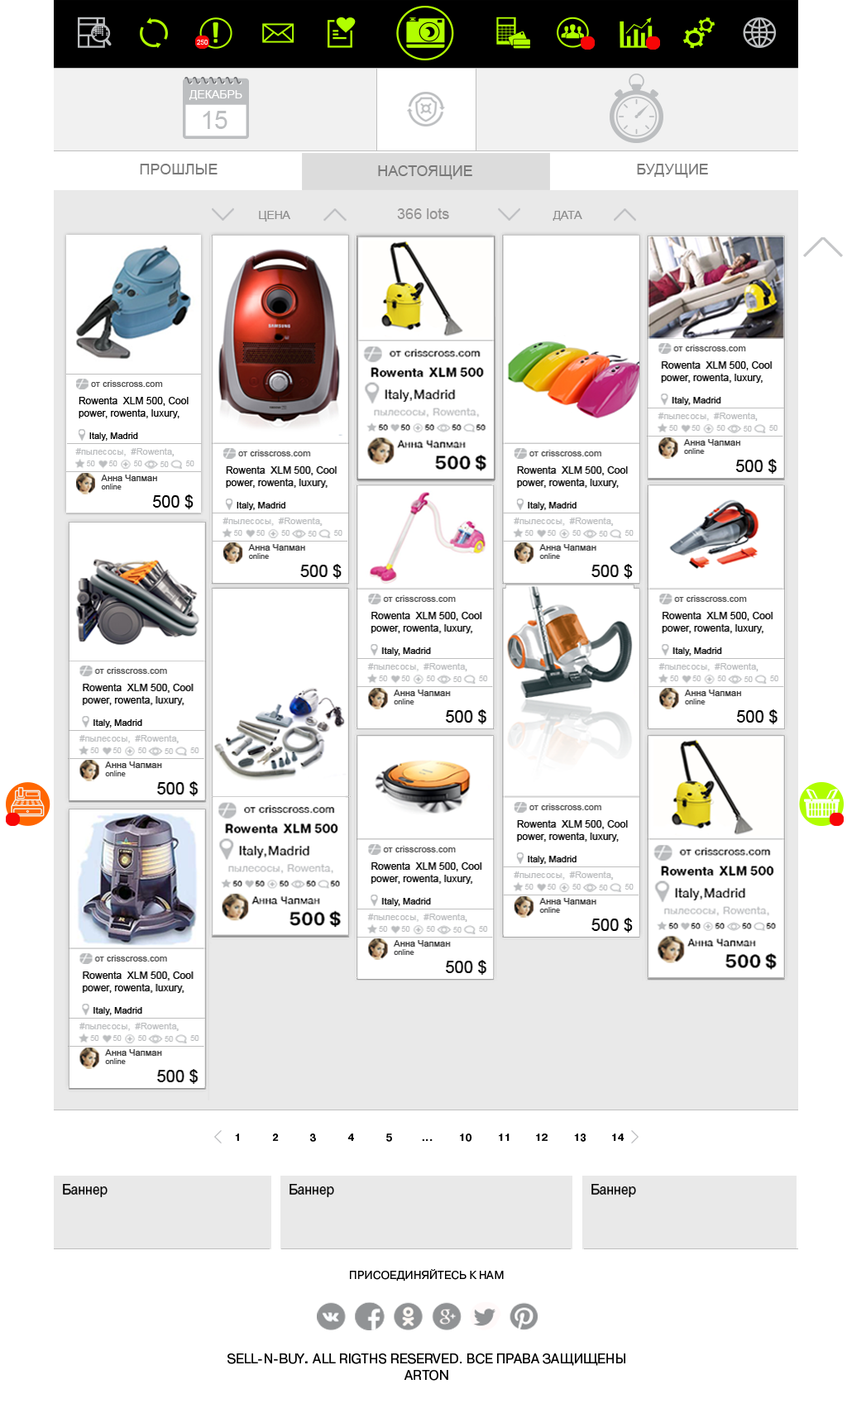
<style>
.page{position:relative;width:847px;height:1408px;background:#ffffff}
.page>*{position:absolute;margin:0}
.t1{font:6.6px "ArialMT";color:#ffffff;text-transform:uppercase}
.t2{font:11.6px "ArialMT";color:#ffffff;text-transform:uppercase}
.t3{font:24.8px "ArialMT";color:#bcbec0;text-transform:uppercase}
.t4{font:14.9px "ArialMT";color:#7a7a7a;text-transform:uppercase}
.t5{font:14.9px "ArialMT";color:#959494}
.t6{font:11.4px "ArialMT";color:#8d8d8d}
.t7{font:9.1px "ArialMT";color:#505050}
.t8{font:9.9px "ArialMT";color:#000000}
.t9{font:9.1px "ArialMT";color:#000000}
.t10{font:9.1px "ArialMT";color:#bbbdbf}
.t11{font:10.1px "Micra";color:#bbbdbf}
.t12{font:7.4px "ArialMT";color:#bbbdbf}
.t13{font:9.1px "ArialMT";color:#313131}
.t14{font:7.4px "ArialMT";color:#48494a}
.t15{font:7.4px "ArialMT";color:#313131}
.t16{font:16.5px "ArialMT";color:#000000}
.t17{font:10px "PragmaticaC-Bold";color:#000000}
.t18{font:11.4px "PragmaticaC";color:#000000;text-transform:uppercase}
.t19{font:13.3px "PragmaticaC";color:#000000;text-transform:uppercase}
.t20{font:13.3px "PragmaticaC-Bold";color:#000000;text-transform:uppercase}
</style>
<div class="page">
<p class="t1" style="left:197px;top:40px;width:11px;height:5px">250</p>
<p class="t2" style="left:189px;top:90px;width:53px;height:10px">декабрь</p>
<p class="t3" style="left:203px;top:111px;width:24px;height:18px">15</p>
<p class="t4" style="left:140px;top:164px;width:77px;height:10px">прошлые</p>
<p class="t4" style="left:378px;top:165px;width:94px;height:14px">настоящие</p>
<p class="t4" style="left:637px;top:164px;width:71px;height:14px">будущие</p>
<p class="t5" style="left:397px;top:208px;width:52px;height:11px">366 lots</p>
<p class="t6" style="left:259px;top:211px;width:31px;height:11px">ЦЕНА</p>
<p class="t6" style="left:552px;top:211px;width:30px;height:10px">ДАТА</p>
<p class="t7" style="left:91px;top:380px;width:72px;height:7px">от crisscross.com</p>
<p class="t8" style="left:79px;top:397px;width:110px;height:21px">Rowenta  XLM 500, Сool<br>power, rowenta, luxury,</p>
<p class="t9" style="left:89px;top:432px;width:49px;height:9px">Italy, Madrid</p>
<p class="t10" style="left:75px;top:448px;width:99px;height:8px">#пылесосы,  #Rowenta<span class="t11">,</span></p>
<p class="t12" style="left:87px;top:461px;width:8px;height:5px">50</p>
<p class="t13" style="left:101px;top:475px;width:56px;height:6px">Анна Чапман</p>
<p class="t14" style="left:101px;top:484px;width:21px;height:6px"><span class="t15"><br></span>online</p>
<p class="t16" style="left:153px;top:494px;width:40px;height:15px">500 $</p>
<p class="t17" style="left:235px;top:1134px;width:4px;height:7px">1</p>
<p class="t17" style="left:272px;top:1134px;width:7px;height:7px">2</p>
<p class="t17" style="left:309px;top:1134px;width:7px;height:8px">3</p>
<p class="t17" style="left:347px;top:1134px;width:7px;height:7px">4</p>
<p class="t17" style="left:386px;top:1134px;width:6px;height:8px">5</p>
<p class="t17" style="left:460px;top:1134px;width:12px;height:8px">10</p>
<p class="t17" style="left:499px;top:1134px;width:10px;height:7px">11</p>
<p class="t17" style="left:536px;top:1134px;width:11px;height:7px">12</p>
<p class="t17" style="left:574px;top:1134px;width:12px;height:8px">13</p>
<p class="t17" style="left:612px;top:1134px;width:12px;height:7px">14</p>
<p class="t17" style="left:422px;top:1139px;width:10px;height:2px">...</p>
<p class="t18" style="left:350px;top:1269px;width:154px;height:13px">Присоединяйтесь к нам</p>
<p class="t19" style="left:227px;top:1354px;width:398px;height:27px;text-align:center">Sell-n-buy<span class="t20">. </span>all rigths reserved. все права защищены<br>arton</p>
</div>
